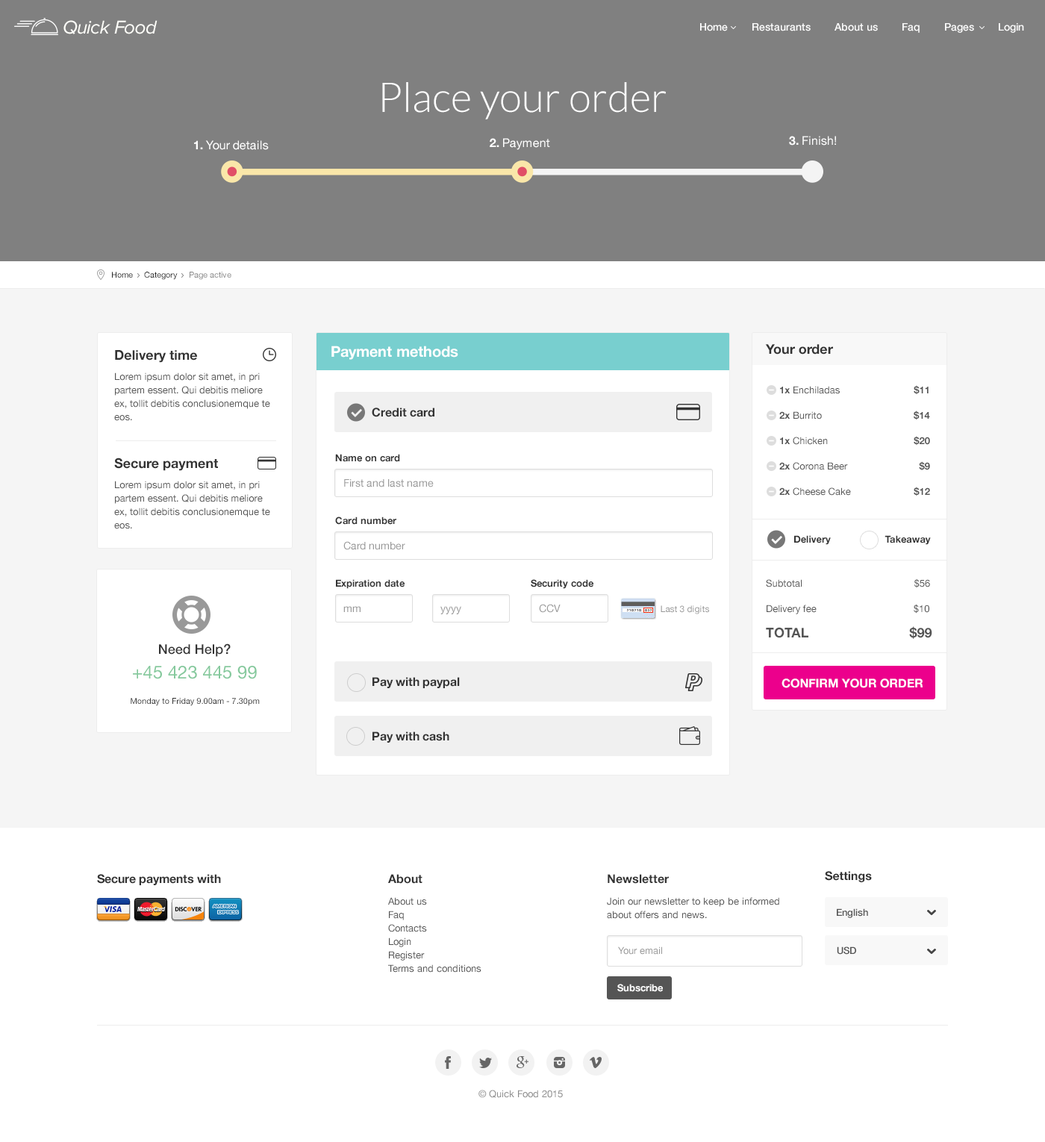
<style>
.page{position:relative;width:1045px;height:1142px;background:#ffffff}
.page>*{position:absolute;margin:0}
.t1{font:19.4px "ProximaNova-RegularIt";letter-spacing:-0.025em;color:#fefef9}
.t2{font:10.4px "HelveticaNeue-Medium";color:#ffffff}
.t3{font:41px "Lato-Light";color:#ffffff}
.t4{font:11.9px "HelveticaNeue";color:#ffffff}
.t5{font:11.9px "HelveticaNeue-Bold";color:#ffffff}
.t6{font:8.2px "HelveticaNeue";color:#252525}
.t7{font:8.2px "HelveticaNeue";color:#888888}
.t8{font:13.4px "HelveticaNeue-Bold";color:#333333}
.t9{font:14.9px "HelveticaNeue-Bold";color:#ffffff}
.t10{font:9.7px/13.4px "HelveticaNeue";color:#555555}
.t11{font:9.7px/25.4px "HelveticaNeue-Bold";color:#555555}
.t12{font:9.7px/25.4px "HelveticaNeue";color:#555555}
.t13{font:11.9px "HelveticaNeue-Bold";color:#333333}
.t14{font:9.7px "HelveticaNeue-Bold";color:#333333}
.t15{font:10.4px "HelveticaNeue";color:#999999}
.t16{font:13.4px/25.4px "HelveticaNeue-Bold";color:#555555}
.t17{font:9px "HelveticaNeue";color:#999999}
.t18{font:13.4px "HelveticaNeue-Medium";color:#333333}
.t19{font:17.9px "HelveticaNeue";color:#85c99d}
.t20{font:8.2px "HelveticaNeue";color:#333333}
.t21{font:9.7px "HelveticaNeue-Medium";color:#555555}
.t22{font:9.7px "HelveticaNeue";color:#999999}
.t23{font:9.7px "HelveticaNeue-Bold";color:#ffffff}
.t24{font:9.7px "HelveticaNeue";color:#8c8c8c}
</style>
<div class="page">
<p class="t1" style="left:63px;top:20px;width:94px;height:14px">Quick Food</p>
<p class="t2" style="left:700px;top:23px;width:324px;height:10px">Home        Restaurants        About us        Faq        Pages        Login</p>
<p class="t3" style="left:382px;top:82px;width:284px;height:37px">Place your order</p>
<p class="t4" style="left:789px;top:136px;width:47px;height:9px"><span class="t5">3.</span> Finish!</p>
<p class="t4" style="left:194px;top:140px;width:75px;height:10px"><span class="t5">1.</span> Your details</p>
<p class="t4" style="left:489px;top:138px;width:61px;height:12px"><span class="t5">2.</span> Payment</p>
<p class="t6" style="left:112px;top:272px;width:119px;height:8px">Home     Category     <span class="t7">Page active</span></p>
<p class="t8" style="left:115px;top:350px;width:82px;height:13px">Delivery time</p>
<p class="t9" style="left:331px;top:345px;width:127px;height:15px">Payment methods</p>
<p class="t8" style="left:765px;top:344px;width:68px;height:10px">Your order</p>
<p class="t10" style="left:114px;top:372px;width:156px;height:49px">Lorem ipsum dolor sit amet, in pri partem essent. Qui debitis meliore ex, tollit debitis conclusionemque te eos.</p>
<p class="t11" style="left:779px;top:385px;width:151px;height:111px"><span class="t12">     </span>1x<span class="t12"> Enchiladas                 </span>$11<br>     2x<span class="t12"> Burrito       </span> $14<br>     1x<span class="t12"> Chicken                          </span>$20<br>     2x<span class="t12"> Corona Beer                  </span>$9<br>     2x<span class="t12"> Cheese Cake               </span> $12</p>
<p class="t13" style="left:372px;top:407px;width:62px;height:10px">Credit card</p>
<p class="t8" style="left:114px;top:457px;width:104px;height:14px">Secure payment</p>
<p class="t14" style="left:335px;top:454px;width:65px;height:8px">Name on card</p>
<p class="t10" style="left:114px;top:480px;width:156px;height:49px">Lorem ipsum dolor sit amet, in pri partem essent. Qui debitis meliore ex, tollit debitis conclusionemque te eos.</p>
<p class="t15" style="left:344px;top:479px;width:89px;height:8px">First and last name</p>
<p class="t14" style="left:335px;top:516px;width:61px;height:9px">Card number</p>
<p class="t15" style="left:343px;top:541px;width:62px;height:9px">Card number</p>
<p class="t14" style="left:794px;top:535px;width:136px;height:10px">Delivery           Takeaway</p>
<p class="t14" style="left:336px;top:579px;width:68px;height:10px">Expiration date</p>
<p class="t14" style="left:530px;top:579px;width:63px;height:10px">Security code</p>
<p class="t12" style="left:766px;top:578px;width:166px;height:61px">Subtotal                                     $56<br>Delivery fee                                    $10<br><span class="t16">TOTAL                           $99</span></p>
<p class="t15" style="left:343px;top:606px;width:17px;height:6px">mm</p>
<p class="t15" style="left:440px;top:606px;width:21px;height:8px">yyyy</p>
<p class="t15" style="left:539px;top:604px;width:21px;height:9px">CCV</p>
<p class="t17" style="left:660px;top:605px;width:49px;height:9px">Last 3 digits</p>
<p class="t18" style="left:159px;top:643px;width:72px;height:14px">Need Help?</p>
<p class="t19" style="left:133px;top:666px;width:124px;height:13px">+45 423 445 99</p>
<p class="t13" style="left:372px;top:677px;width:88px;height:11px">Pay with paypal</p>
<p class="t5" style="left:781px;top:678px;width:141px;height:10px">CONFIRM YOUR ORDER</p>
<p class="t20" style="left:131px;top:698px;width:129px;height:8px">Monday to Friday 9.00am - 7.30pm</p>
<p class="t13" style="left:372px;top:731px;width:77px;height:11px">Pay with cash</p>
<p class="t13" style="left:97px;top:874px;width:124px;height:11px">Secure payments with</p>
<p class="t13" style="left:388px;top:874px;width:34px;height:9px">About</p>
<p class="t13" style="left:607px;top:874px;width:62px;height:9px">Newsletter</p>
<p class="t13" style="left:824px;top:871px;width:47px;height:11px">Settings</p>
<p class="t10" style="left:388px;top:897px;width:93px;height:75px">About us<br>Faq<br>Contacts<br>Login<br>Register<br>Terms and conditions</p>
<p class="t10" style="left:607px;top:897px;width:172px;height:21px">Join our newsletter to keep be informed about offers and news.</p>
<p class="t21" style="left:836px;top:908px;width:32px;height:10px">English</p>
<p class="t22" style="left:618px;top:946px;width:44px;height:8px">Your email</p>
<p class="t21" style="left:836px;top:946px;width:20px;height:8px">USD</p>
<p class="t23" style="left:617px;top:983px;width:46px;height:9px">Subscribe</p>
<p class="t24" style="left:478px;top:1089px;width:85px;height:9px">© Quick Food 2015</p>
</div>
